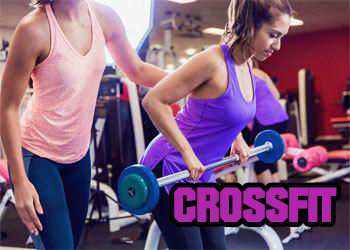
<style>
.page{position:relative;width:350px;height:250px}
.page>*{position:absolute;margin:0}
.t1{font:48px "Autumn";letter-spacing:-0.025em;color:#b226ad}
</style>
<div class="page">
<p class="t1" style="left:174px;top:187px;width:163px;height:35px">CROSSFIT</p>
</div>
